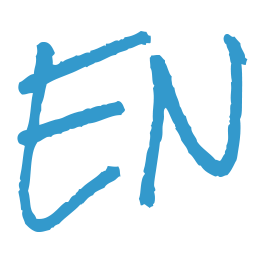
<style>
.page{position:relative;width:260px;height:260px;background:#ffffff}
.page>*{position:absolute;margin:0}
.t1{font:130px "RockSalt";color:#3399cc}
</style>
<div class="page">
<p class="t1" style="left:17px;top:31px;width:231px;height:201px">EN</p>
</div>
